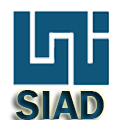
<style>
.page{position:relative;width:120px;height:120px;background:#ffffff}
.page>*{position:absolute;margin:0}
.t1{font:42px "FranklinGothic-Demi"}
</style>
<div class="page">
<p class="t1" style="left:16px;top:90px;width:88px;height:30px">SIAD</p>
</div>
